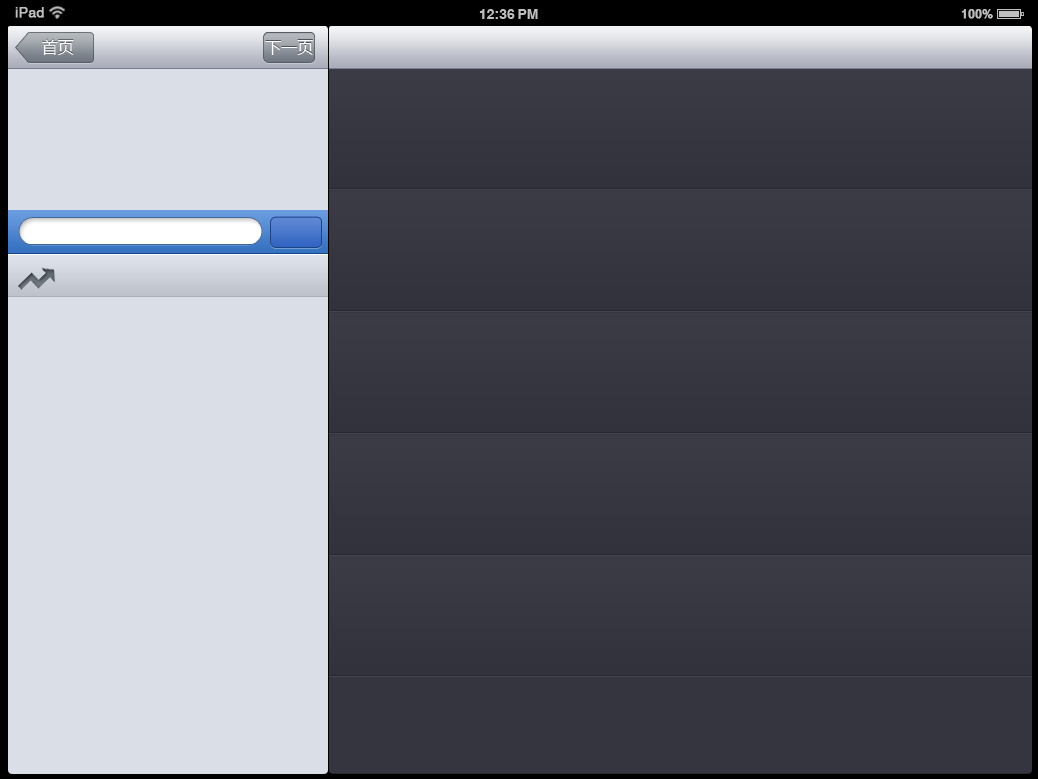
<style>
.page{position:relative;width:1038px;height:779px;background:#dadee6}
.page>*{position:absolute;margin:0}
.t1{font:14px "JQZhongYuanJT";color:#bfbfbf;font-weight:bold}
.t2{font:14px "CTCuHeiSJ";color:#bfbfbf}
.t3{font:12px "CTCuHeiSJ";color:#bfbfbf;font-weight:bold}
.t4{font:16px "MicrosoftYaHei";color:#fffefe}
.t5{font:16px "MicrosoftYaHei";color:#ffffff}
</style>
<div class="page">
<p class="t1" style="left:15px;top:7px;width:29px;height:11px">iPad</p>
<p class="t2" style="left:479px;top:9px;width:36px;height:10px">12:36</p>
<p class="t2" style="left:518px;top:9px;width:20px;height:10px">PM</p>
<p class="t3" style="left:961px;top:9px;width:32px;height:10px">100%</p>
<p class="t4" style="left:42px;top:39px;width:32px;height:17px">首页</p>
<p class="t5" style="left:265px;top:40px;width:48px;height:15px">下一页</p>
</div>
